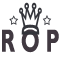
<style>
.page{position:relative;width:60px;height:60px;background:#ffffff}
.page>*{position:absolute;margin:0}
.t1{font:32.2px "GillSansMT-Bold";color:#413941;scale:0.67 1}
</style>
<div class="page">
<p class="t1" style="left:2px;top:29px;width:57px;height:24px">R O P</p>
</div>
